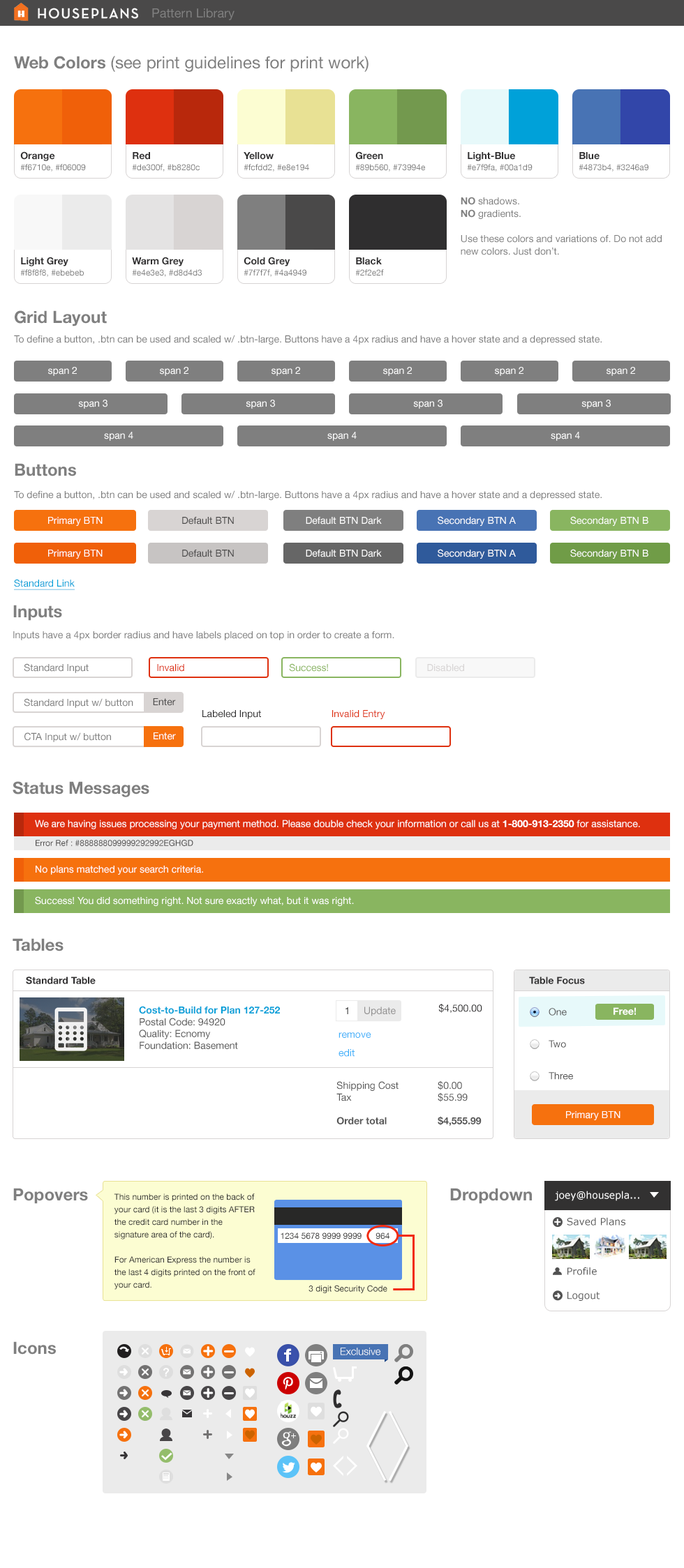
<style>
.page{position:relative;width:684px;height:1568px;background:#ffffff}
.page>*{position:absolute;margin:0}
.t1{font:12.6px "HelveticaNeue";color:#7f7f7f}
.t2{font:16.8px "HelveticaNeue";color:#7f7f7f}
.t3{font:16.8px "HelveticaNeue-Bold";color:#7f7f7f}
.t4{font:8.4px/11.2px "HelveticaNeue";color:#7f7f7f}
.t5{font:9.8px/11.2px "HelveticaNeue-Bold";color:#2f2e2f}
.t6{font:9.8px/12.6px "HelveticaNeue";color:#7f7f7f}
.t7{font:9.8px/12.6px "HelveticaNeue-Bold";color:#7f7f7f}
.t8{font:9.8px "HelveticaNeue";color:#7f7f7f}
.t9{font:9.8px "HelveticaNeue";color:#ffffff}
.t10{font:16.9px "HelveticaNeue-Bold";color:#7f7f7f}
.t11{font:9.8px "HelveticaNeue";color:#4a4949}
.t12{font:9.8px "HelveticaNeue";color:#00a1d9;text-decoration:underline}
.t13{font:9.8px "HelveticaNeue";color:#de300f}
.t14{font:9.8px "HelveticaNeue";color:#89b560}
.t15{font:9.8px "HelveticaNeue";color:#d7d4d4}
.t16{font:9.8px "HelveticaNeue";color:#2f2e2f}
.t17{font:9.7px "HelveticaNeue";color:#de300f}
.t18{font:9.8px "HelveticaNeue-Bold";color:#ffffff}
.t19{font:8.4px "HelveticaNeue";color:#504e4e}
.t20{font:9.8px "HelveticaNeue-Bold";color:#2f2e2f}
.t21{font:9.8px "HelveticaNeue";color:#575757}
.t22{font:9.8px "HelveticaNeue-Bold";color:#07a1d9}
.t23{font:9.8px "HelveticaNeue"}
.t24{font:9.9px "HelveticaNeue";color:#929191}
.t25{font:9.9px "HelveticaNeue";color:#2f2e2f}
.t26{font:9.7px/32px "HelveticaNeue";color:#575757}
.t27{font:9.7px "HelveticaNeue-Bold";color:#ffffff}
.t28{font:9.9px/18.4px "HelveticaNeue";color:#3eb0f9}
.t29{font:9.8px "HelveticaNeue-Bold";color:#575757}
.t30{font:8.4px/12.6px "HelveticaNeue";color:#323231}
.t31{font:9.8px "Verdana";color:#ffffff}
.t32{font:9.8px "Verdana";color:#535353}
.t33{font:8.4px "HelveticaNeue";color:#323231}
.t34{font:9.6px "Verdana";color:#535353}
</style>
<div class="page">
<p class="t1" style="left:152px;top:8px;width:82px;height:12px">Pattern Library</p>
<p class="t2" style="left:14px;top:56px;width:354px;height:16px"><span class="t3">Web Colors</span> (see print guidelines for print work)</p>
<p class="t4" style="left:20px;top:151px;width:66px;height:21px"><span class="t5">Orange<br></span>#f6710e, #f06009</p>
<p class="t4" style="left:132px;top:152px;width:67px;height:20px"><span class="t5">Red<br></span>#de300f, #b8280c</p>
<p class="t4" style="left:243px;top:152px;width:66px;height:20px"><span class="t5">Yellow<br></span>#fcfdd2, #e8e194</p>
<p class="t4" style="left:355px;top:151px;width:70px;height:21px"><span class="t5">Green<br></span>#89b560, #73994e</p>
<p class="t4" style="left:467px;top:152px;width:65px;height:20px"><span class="t5">Light-Blue<br></span>#e7f9fa, #00a1d9</p>
<p class="t4" style="left:578px;top:152px;width:70px;height:20px"><span class="t5">Blue<br></span>#4873b4, #3246a9</p>
<p class="t6" style="left:460px;top:197px;width:201px;height:58px"><span class="t7">NO</span> shadows. <br><span class="t7">NO</span> gradients. <br><br>Use these colors and variations of. Do not add new colors. Just don’t.</p>
<p class="t4" style="left:20px;top:257px;width:64px;height:20px"><span class="t5">Light Grey<br></span>#f8f8f8, #ebebeb</p>
<p class="t4" style="left:132px;top:257px;width:70px;height:20px"><span class="t5">Warm Grey<br></span>#e4e3e3, #d8d4d3</p>
<p class="t4" style="left:243px;top:257px;width:63px;height:20px"><span class="t5">Cold Grey<br></span>#7f7f7f, #4a4949</p>
<p class="t4" style="left:355px;top:257px;width:29px;height:19px"><span class="t5">Black<br></span>#2f2e2f</p>
<p class="t3" style="left:15px;top:310px;width:92px;height:16px">Grid Layout</p>
<p class="t8" style="left:14px;top:335px;width:587px;height:10px">To define a button, .btn can be used and scaled w/ .btn-large. Buttons have a 4px radius and have a hover state and a depressed state.</p>
<p class="t9" style="left:48px;top:367px;width:29px;height:9px">span 2</p>
<p class="t9" style="left:160px;top:367px;width:28px;height:9px">span 2</p>
<p class="t9" style="left:271px;top:367px;width:29px;height:9px">span 2</p>
<p class="t9" style="left:383px;top:367px;width:29px;height:9px">span 2</p>
<p class="t9" style="left:495px;top:367px;width:28px;height:9px">span 2</p>
<p class="t9" style="left:606px;top:367px;width:29px;height:9px">span 2</p>
<p class="t9" style="left:78px;top:400px;width:29px;height:9px">span 3</p>
<p class="t9" style="left:246px;top:400px;width:29px;height:9px">span 3</p>
<p class="t9" style="left:413px;top:400px;width:29px;height:9px">span 3</p>
<p class="t9" style="left:581px;top:400px;width:29px;height:9px">span 3</p>
<p class="t9" style="left:104px;top:432px;width:29px;height:9px">span 4</p>
<p class="t9" style="left:327px;top:432px;width:29px;height:9px">span 4</p>
<p class="t9" style="left:550px;top:432px;width:30px;height:9px">span 4</p>
<p class="t10" style="left:15px;top:463px;width:61px;height:13px">Buttons</p>
<p class="t8" style="left:14px;top:490px;width:587px;height:10px">To define a button, .btn can be used and scaled w/ .btn-large. Buttons have a 4px radius and have a hover state and a depressed state.</p>
<p class="t9" style="left:48px;top:517px;width:55px;height:9px">Primary BTN</p>
<p class="t11" style="left:182px;top:517px;width:52px;height:8px">Default BTN</p>
<p class="t9" style="left:306px;top:517px;width:76px;height:8px">Default BTN Dark</p>
<p class="t9" style="left:437px;top:516px;width:78px;height:10px">Secondary BTN A</p>
<p class="t9" style="left:570px;top:516px;width:78px;height:10px">Secondary BTN B</p>
<p class="t9" style="left:48px;top:550px;width:55px;height:9px">Primary BTN</p>
<p class="t11" style="left:182px;top:550px;width:52px;height:7px">Default BTN</p>
<p class="t9" style="left:306px;top:550px;width:76px;height:7px">Default BTN Dark</p>
<p class="t9" style="left:437px;top:549px;width:78px;height:10px">Secondary BTN A</p>
<p class="t9" style="left:570px;top:549px;width:78px;height:10px">Secondary BTN B</p>
<p class="t12" style="left:14px;top:579px;width:61px;height:11px">Standard Link</p>
<p class="t3" style="left:13px;top:605px;width:49px;height:16px">Inputs</p>
<p class="t8" style="left:13px;top:631px;width:381px;height:9px">Inputs have a 4px border radius and have labels placed on top in order to create a form.</p>
<p class="t8" style="left:24px;top:663px;width:65px;height:10px">Standard Input</p>
<p class="t13" style="left:157px;top:664px;width:27px;height:8px">Invalid</p>
<p class="t14" style="left:289px;top:663px;width:39px;height:9px">Success!</p>
<p class="t15" style="left:427px;top:664px;width:37px;height:8px">Disabled</p>
<p class="t8" style="left:24px;top:698px;width:109px;height:10px">Standard Input w/ button</p>
<p class="t11" style="left:153px;top:698px;width:23px;height:8px">Enter</p>
<p class="t16" style="left:202px;top:710px;width:59px;height:9px">Labeled Input</p>
<p class="t17" style="left:332px;top:710px;width:53px;height:9px">Invalid Entry</p>
<p class="t8" style="left:24px;top:732px;width:87px;height:10px">CTA Input w/ button</p>
<p class="t9" style="left:153px;top:732px;width:23px;height:8px">Enter</p>
<p class="t3" style="left:13px;top:781px;width:136px;height:16px">Status Messages</p>
<p class="t9" style="left:35px;top:820px;width:605px;height:9px">We are having issues processing your payment method. Please double check your information or call us at <span class="t18">1-800-913-2350</span> for assistance.</p>
<p class="t19" style="left:36px;top:840px;width:157px;height:6px">Error Ref : #888888099999292992EGHGD</p>
<p class="t9" style="left:36px;top:866px;width:167px;height:9px">No plans matched your search criteria.</p>
<p class="t9" style="left:35px;top:896px;width:319px;height:10px">Success! You did something right. Not sure exactly what, but it was right.</p>
<p class="t3" style="left:13px;top:938px;width:50px;height:13px">Tables</p>
<p class="t20" style="left:26px;top:977px;width:70px;height:7px">Standard Table</p>
<p class="t20" style="left:529px;top:977px;width:56px;height:7px">Table Focus</p>
<p class="t21" style="left:139px;top:1006px;width:141px;height:43px"><span class="t22">Cost-to-Build for Plan 127-252 <br></span>Postal Code: 94920<br>Quality: Ecnomy<br>Foundation: Basement</p>
<p class="t23" style="left:345px;top:1007px;width:3px;height:7px">1</p>
<p class="t24" style="left:364px;top:1007px;width:31px;height:9px">Update</p>
<p class="t25" style="left:438px;top:1004px;width:44px;height:9px">$4,500.00</p>
<p class="t26" style="left:548px;top:1008px;width:25px;height:72px">One<br>Two<br>Three</p>
<p class="t27" style="left:613px;top:1007px;width:22px;height:8px">Free!</p>
<p class="t28" style="left:338px;top:1032px;width:33px;height:25px">remove<br>edit</p>
<p class="t21" style="left:336px;top:1081px;width:62px;height:43px">Shipping Cost<br>Tax<br><br><span class="t29">Order total</span></p>
<p class="t21" style="left:437px;top:1080px;width:44px;height:46px">$0.00<br>$55.99<br><br><span class="t29">$4,555.99</span></p>
<p class="t9" style="left:566px;top:1111px;width:54px;height:9px">Primary BTN</p>
<p class="t3" style="left:13px;top:1188px;width:75px;height:16px">Popovers</p>
<p class="t30" style="left:114px;top:1193px;width:141px;height:97px">This number is printed on the back of your card (it is the last 3 digits AFTER the credit card number in the signature area of the card).<br><br>For American Express the number is the last 4 digits printed on the front of your card.</p>
<p class="t3" style="left:450px;top:1188px;width:82px;height:16px">Dropdown</p>
<p class="t31" style="left:555px;top:1191px;width:84px;height:10px">joey@housepla...</p>
<p class="t32" style="left:566px;top:1217px;width:59px;height:9px">Saved Plans</p>
<p class="t33" style="left:280px;top:1232px;width:109px;height:7px">1234 5678 9999 9999      964</p>
<p class="t34" style="left:567px;top:1267px;width:29px;height:8px">Profile</p>
<p class="t33" style="left:308px;top:1285px;width:79px;height:8px">3 digit Security Code</p>
<p class="t32" style="left:567px;top:1292px;width:33px;height:9px">Logout</p>
<p class="t3" style="left:13px;top:1341px;width:43px;height:14px">Icons</p>
</div>
